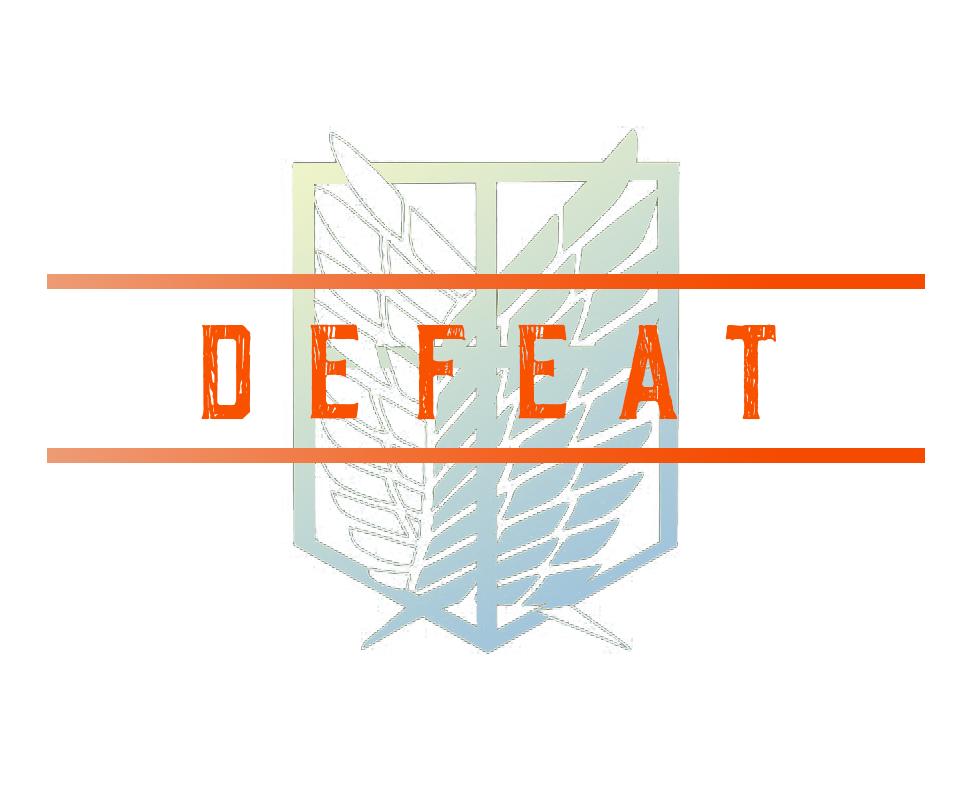
<style>
.page{position:relative;width:980px;height:793px;background:#ffffff}
.page>*{position:absolute;margin:0}
.t1{font:120px "WoodHellCompany";letter-spacing:0.44em;color:#f85200}
</style>
<div class="page">
<p class="t1" style="left:201px;top:324px;width:575px;height:96px">dEFEAT</p>
</div>
